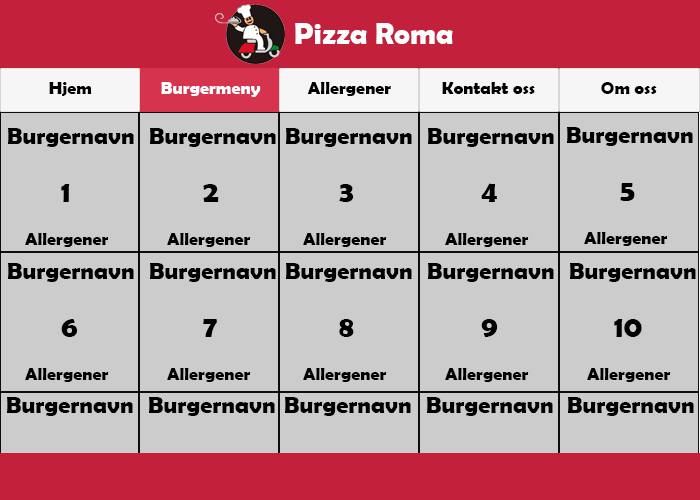
<style>
.page{position:relative;width:700px;height:500px;background:#cccccc}
.page>*{position:absolute;margin:0}
.t1{font:30px "BerlinSansFBDemi-Bold";color:#ffffff}
.t2{font:18px "BerlinSansFBDemi-Bold";color:#000000}
.t3{font:18px "BerlinSansFBDemi-Bold";color:#ffffff}
.t4{font:24px "BerlinSansFBDemi-Bold";color:#000000}
.t5{font:30px "BerlinSansFBDemi-Bold";color:#000000}
</style>
<div class="page">
<p class="t1" style="left:295px;top:23px;width:158px;height:21px">Pizza Roma</p>
<p class="t2" style="left:49px;top:82px;width:43px;height:14px">Hjem</p>
<p class="t3" style="left:161px;top:82px;width:100px;height:15px">Burgermeny</p>
<p class="t2" style="left:307px;top:82px;width:84px;height:14px">Allergener</p>
<p class="t2" style="left:442px;top:82px;width:93px;height:12px">Kontakt oss</p>
<p class="t2" style="left:601px;top:82px;width:56px;height:12px">Om oss</p>
<p class="t4" style="left:8px;top:128px;width:126px;height:119px">Burgernavn<br><br>     <span class="t5">1  <br></span><span class="t2"><br>    Allergener</span></p>
<p class="t4" style="left:150px;top:128px;width:126px;height:119px">Burgernavn<br><br>     <span class="t5">2  <br></span><span class="t2"><br>    Allergener</span></p>
<p class="t4" style="left:286px;top:128px;width:126px;height:119px">Burgernavn<br><br>     <span class="t5">3  <br></span><span class="t2"><br>    Allergener</span></p>
<p class="t4" style="left:428px;top:128px;width:126px;height:119px">Burgernavn<br><br>     <span class="t5">4  <br></span><span class="t2"><br>    Allergener</span></p>
<p class="t4" style="left:567px;top:127px;width:126px;height:119px">Burgernavn<br><br>     <span class="t5">5  <br></span><span class="t2"><br>    Allergener</span></p>
<p class="t4" style="left:8px;top:263px;width:126px;height:119px">Burgernavn<br><br>     <span class="t5">6  <br></span><span class="t2"><br>    Allergener</span></p>
<p class="t4" style="left:150px;top:263px;width:126px;height:119px">Burgernavn<br><br>     <span class="t5">7  <br></span><span class="t2"><br>    Allergener</span></p>
<p class="t4" style="left:286px;top:263px;width:126px;height:119px">Burgernavn<br><br>     <span class="t5">8  <br></span><span class="t2"><br>    Allergener</span></p>
<p class="t4" style="left:428px;top:263px;width:126px;height:119px">Burgernavn<br><br>     <span class="t5">9  <br></span><span class="t2"><br>    Allergener</span></p>
<p class="t4" style="left:570px;top:263px;width:126px;height:119px">Burgernavn<br><br>   <span class="t5">10  <br></span><span class="t2"><br>    Allergener</span></p>
</div>
